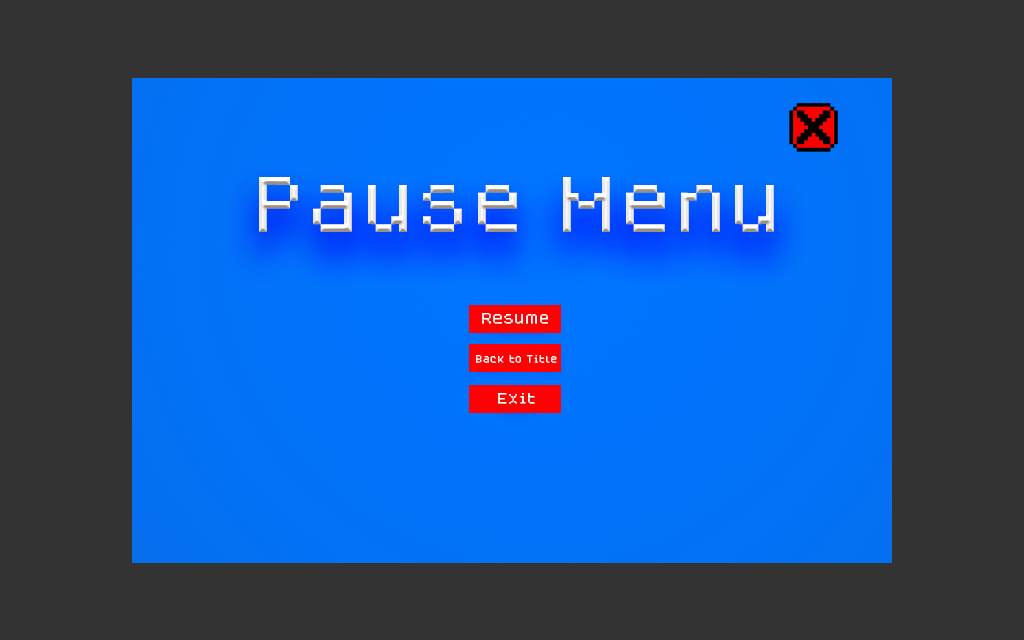
<style>
.page{position:relative;width:1024px;height:640px;background:#333333}
.page>*{position:absolute;margin:0}
.t1{font:62.5px "Dogica_Pixel"}
.t2{font:12.5px "Dogica_Pixel";color:#ffffff}
.t3{font:8.3px "Dogica_Pixel";color:#ffffff}
</style>
<div class="page">
<p class="t1" style="left:259px;top:177px;width:515px;height:55px">Pause Menu</p>
<p class="t2" style="left:482px;top:313px;width:66px;height:11px">Resume</p>
<p class="t3" style="left:476px;top:355px;width:81px;height:8px">Back to Title</p>
<p class="t2" style="left:498px;top:393px;width:37px;height:11px">Exit</p>
</div>
